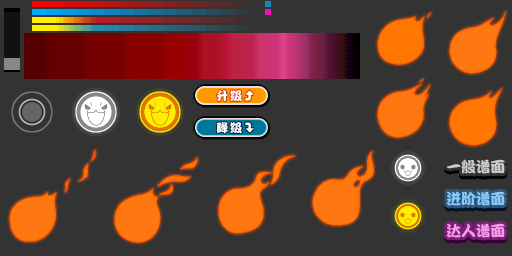
<style>
.page{position:relative;width:512px;height:256px;background:#333333}
.page>*{position:absolute;margin:0}
.t1{font:12px "DFPKanTingLiuW9";letter-spacing:0.15em;color:#ffffff}
.t2{font:15px "DFPKanTingLiuW9";letter-spacing:-0.02em;color:#cccccc}
.t3{font:15px "DFPKanTingLiuW9";letter-spacing:-0.02em;color:#88ccff}
.t4{font:15px "DFPKanTingLiuW9";letter-spacing:-0.02em;color:#ff99ee}
</style>
<div class="page">
<p class="t1" style="left:216px;top:90px;width:26px;height:12px">升级</p>
<p class="t1" style="left:216px;top:122px;width:26px;height:12px">降级</p>
<p class="t1" style="left:216px;top:122px;width:26px;height:12px">降级</p>
<p class="t2" style="left:447px;top:159px;width:58px;height:15px">一般谱面</p>
<p class="t3" style="left:447px;top:191px;width:58px;height:15px">进阶谱面</p>
<p class="t4" style="left:447px;top:223px;width:58px;height:15px">达人谱面</p>
</div>
